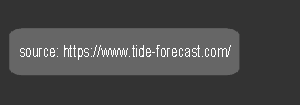
<style>
.page{position:relative;width:300px;height:105px;background:#333333}
.page>*{position:absolute;margin:0}
.t1{font:16.6px "ArialMT";color:#ffffff;scale:0.75 1}
</style>
<div class="page">
<p class="t1" style="left:20px;top:45px;width:211px;height:15px">source: https://www.tide-forecast.com/</p>
</div>
